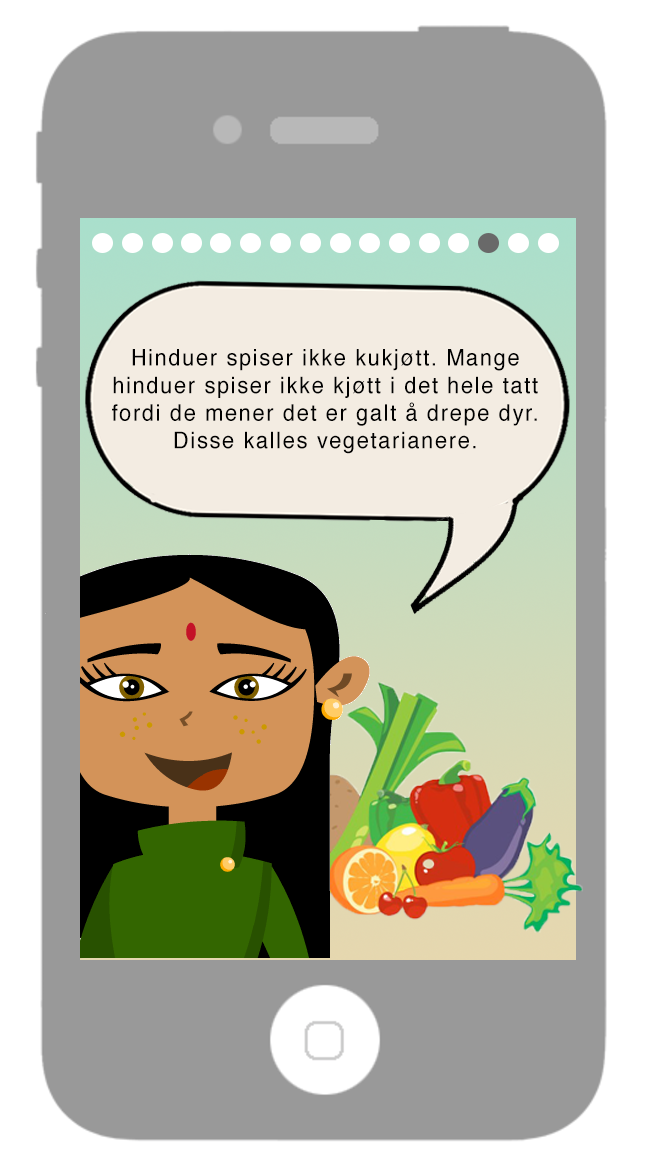
<style>
.page{position:relative;width:646px;height:1172px;background:#999999}
.page>*{position:absolute;margin:0}
.t1{font:11px "Helvetica";letter-spacing:0.075em;color:#010101;scale:0.95 1}
</style>
<div class="page">
<p class="t1" style="left:112px;top:349px;width:426px;height:105px;text-align:center">Hinduer spiser ikke kukjøtt. Mange<br>hinduer spiser ikke kjøtt i det hele tatt<br>fordi de mener det er galt å drepe dyr.<br>Disse kalles vegetarianere.</p>
</div>
